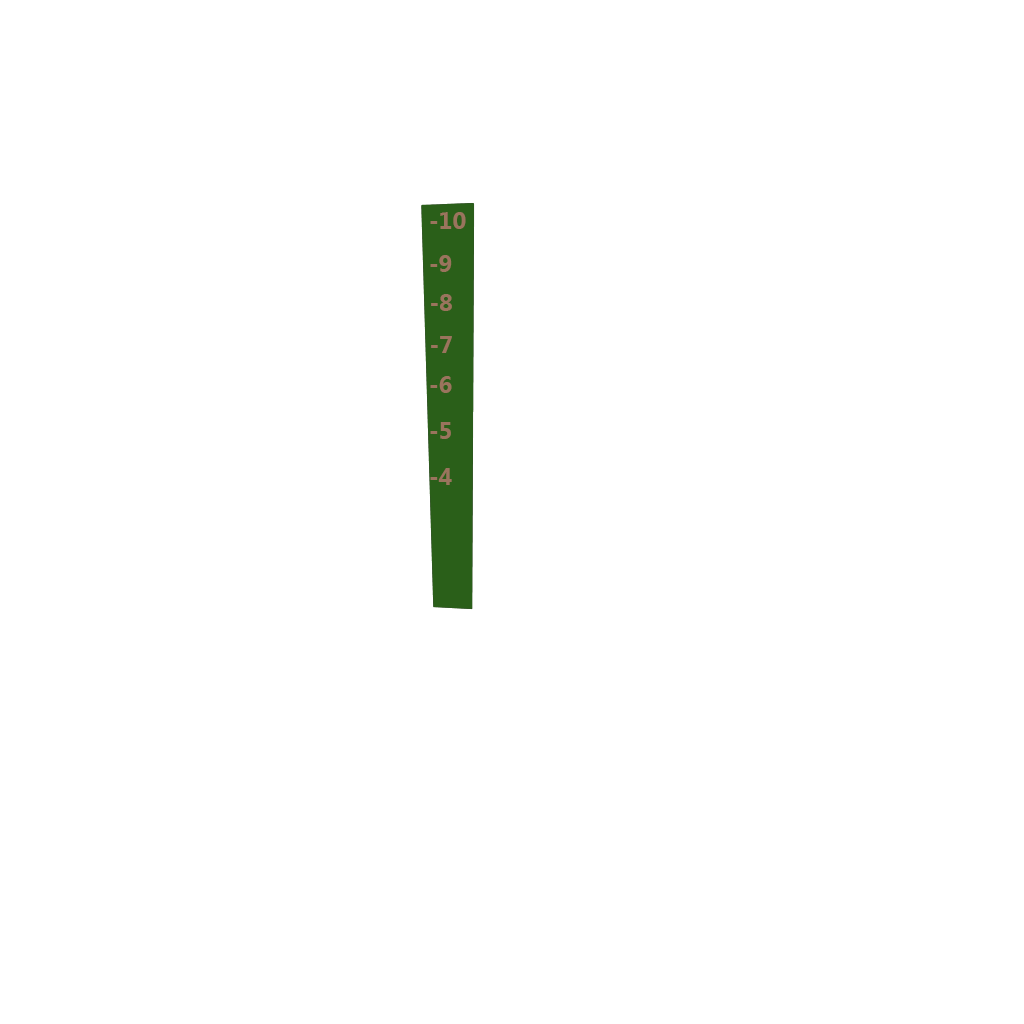
<style>
.page{position:relative;width:1024px;height:1024px;background:#ffffff}
.page>*{position:absolute;margin:0}
.t1{font:24px "MicrosoftNewTaiLue-Bold";color:#9a745d}
</style>
<div class="page">
<p class="t1" style="left:430px;top:212px;width:36px;height:17px">-10</p>
<p class="t1" style="left:430px;top:255px;width:22px;height:17px">-9</p>
<p class="t1" style="left:431px;top:294px;width:21px;height:17px">-8</p>
<p class="t1" style="left:431px;top:336px;width:21px;height:17px">-7</p>
<p class="t1" style="left:430px;top:376px;width:22px;height:17px">-6</p>
<p class="t1" style="left:430px;top:422px;width:21px;height:17px">-5</p>
<p class="t1" style="left:430px;top:468px;width:22px;height:17px">-4</p>
</div>
